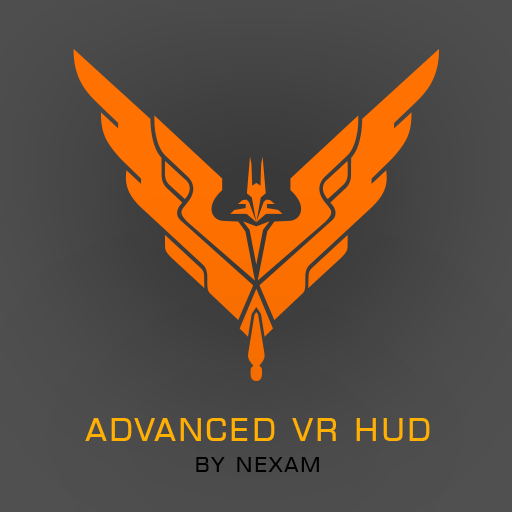
<style>
.page{position:relative;width:512px;height:512px}
.page>*{position:absolute;margin:0}
.t1{font:39.7px "EuroCaps";letter-spacing:0.05em;color:#ffb000}
.t2{font:26.5px "EuroCaps";letter-spacing:0.05em;color:#000000}
</style>
<div class="page">
<p class="t1" style="left:85px;top:418px;width:345px;height:54px;text-align:center">ADVANCED VR HUD<br><span class="t2">by NEXAM</span></p>
</div>
